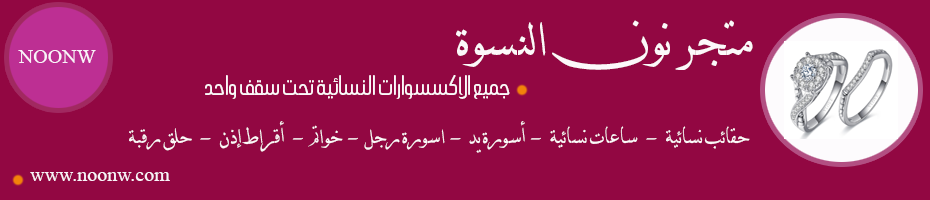
<style>
.page{position:relative;width:930px;height:200px;background:#920742}
.page>*{position:absolute;margin:0}
.t1{font:58.3px "DecoTypeNaskhExtensions";color:#fcf8fa}
.t2{font:20px "TimesNewRomanPSMT";color:#faf3fa}
.t3{font:18px "AraAlharbiAlhanoof";color:#fcf8fa}
.t4{font:24px "DecoTypeNaskhVariants";color:#fcf8fa}
</style>
<div class="page">
<p class="t1" style="left:456px;top:20px;width:297px;height:50px">متجر نون النسوة</p>
<p class="t2" style="left:18px;top:50px;width:78px;height:13px">NOONW</p>
<p class="t3" style="left:205px;top:75px;width:305px;height:24px">جميع الاكسسوارات النسائية تحت سقف واحد</p>
<p class="t4" style="left:129px;top:121px;width:621px;height:32px">حقائب نسائية   -   ساعات نسائية   -  أسورة يد  -  اسورة رجل  -  خواتم  -   أقراط إذن   -   حلق رقبة</p>
<p class="t2" style="left:30px;top:172px;width:140px;height:9px">www.noonw.com</p>
</div>
